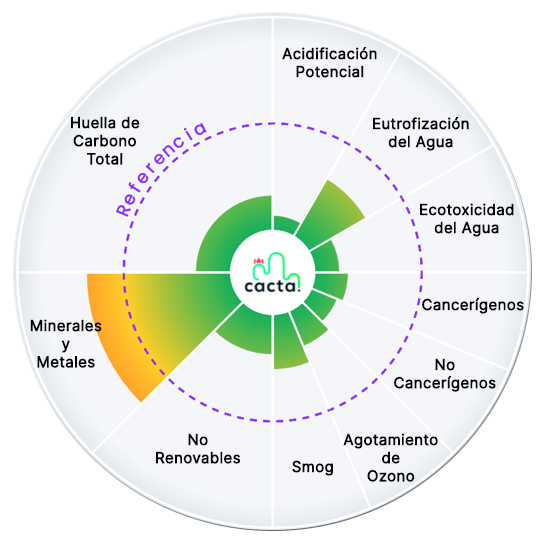
<style>
.page{position:relative;width:544px;height:544px;background:#f4f6f9}
.page>*{position:absolute;margin:0}
.t1{font:15px/18px "Inter-Regular";color:#050505;font-weight:bold}
.t2{font:15.1px/18.1px "Inter-Regular";color:#050505;font-weight:bold}
.t3{font:15.1px "Inter-Regular";color:#050505;font-weight:bold}
</style>
<div class="page">
<p class="t1" style="left:282px;top:47px;width:95px;height:31px;text-align:center">Acidificación<br>Potencial</p>
<p class="t2" style="left:71px;top:116px;width:69px;height:49px;text-align:center">Huella de<br>Carbono<br>Total</p>
<p class="t1" style="left:373px;top:117px;width:96px;height:34px;text-align:center">Eutrofización<br>del Agua</p>
<p class="t1" style="left:420px;top:203px;width:94px;height:34px;text-align:center">Ecotoxicidad<br>del Agua</p>
<p class="t3" style="left:422px;top:297px;width:102px;height:17px">Cancerígenos</p>
<p class="t2" style="left:30px;top:319px;width:72px;height:49px;text-align:center">Minerales<br>y<br>Metales</p>
<p class="t2" style="left:394px;top:358px;width:102px;height:34px;text-align:center">No<br>Cancerígenos</p>
<p class="t2" style="left:156px;top:433px;width:84px;height:31px;text-align:center">No<br>Renovables</p>
<p class="t2" style="left:343px;top:433px;width:95px;height:49px;text-align:center">Agotamiento<br>de<br>Ozono</p>
<p class="t3" style="left:292px;top:460px;width:41px;height:16px">Smog</p>
</div>
